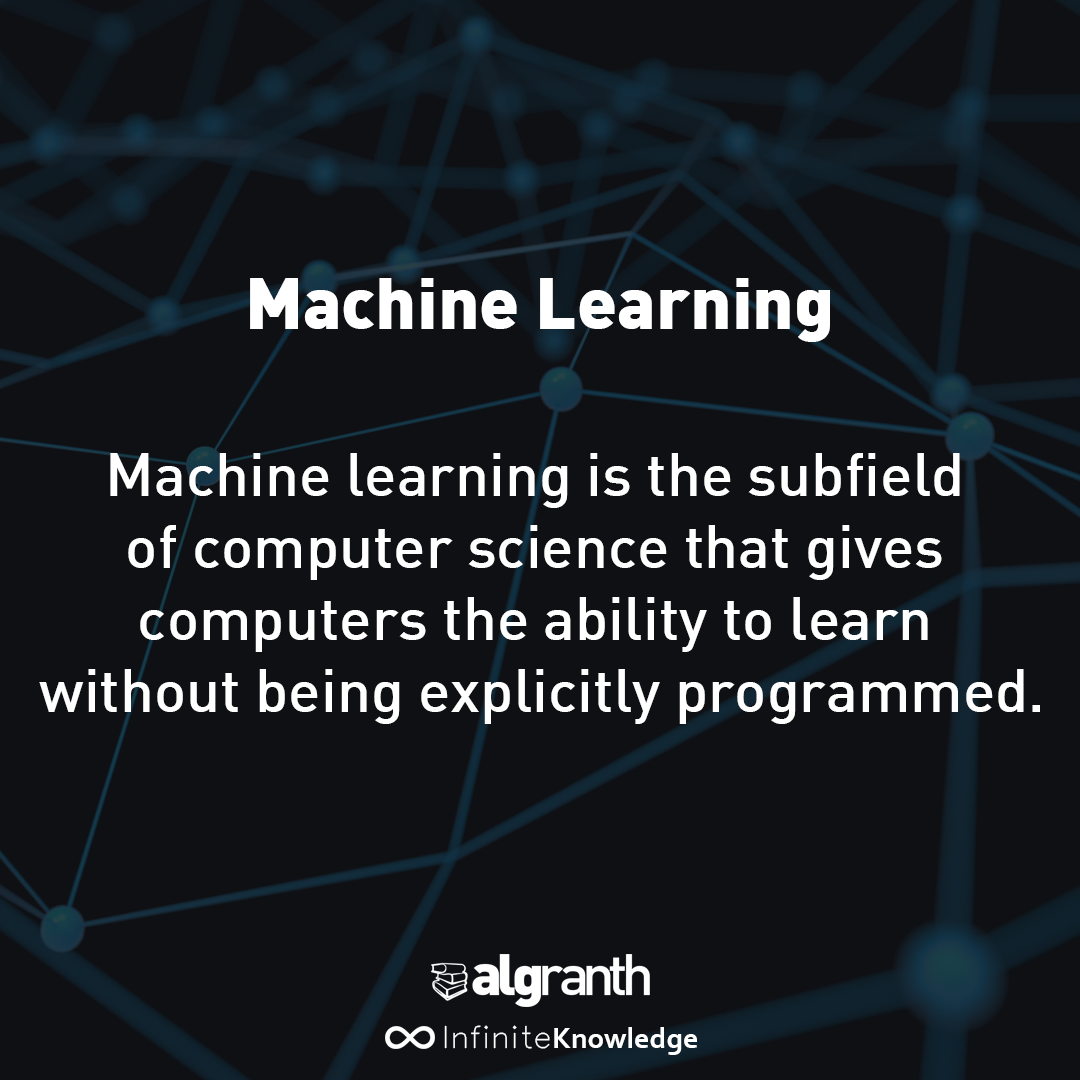
<style>
.page{position:relative;width:1080px;height:1080px;background:#0e1014}
.page>*{position:absolute;margin:0}
.t1{font:72px "DIN-Black";color:#ffffff}
.t2{font:60px "DIN-Medium";color:#ffffff}
.t3{font:30px "Corbel-Bold";color:#ffffff}
.t4{font:30px "Simplex_IV25";color:#ffffff}
</style>
<div class="page">
<p class="t1" style="left:250px;top:278px;width:580px;height:64px">Machine Learning</p>
<p class="t2" style="left:39px;top:453px;width:1001px;height:271px;text-align:center">Machine learning is the subfield <br>of computer science that gives <br>computers the ability to learn <br>without being explicitly programmed.</p>
<p class="t3" style="left:444px;top:1025px;width:253px;height:30px"><span class="t4">Infinite</span>Knowledge</p>
</div>
